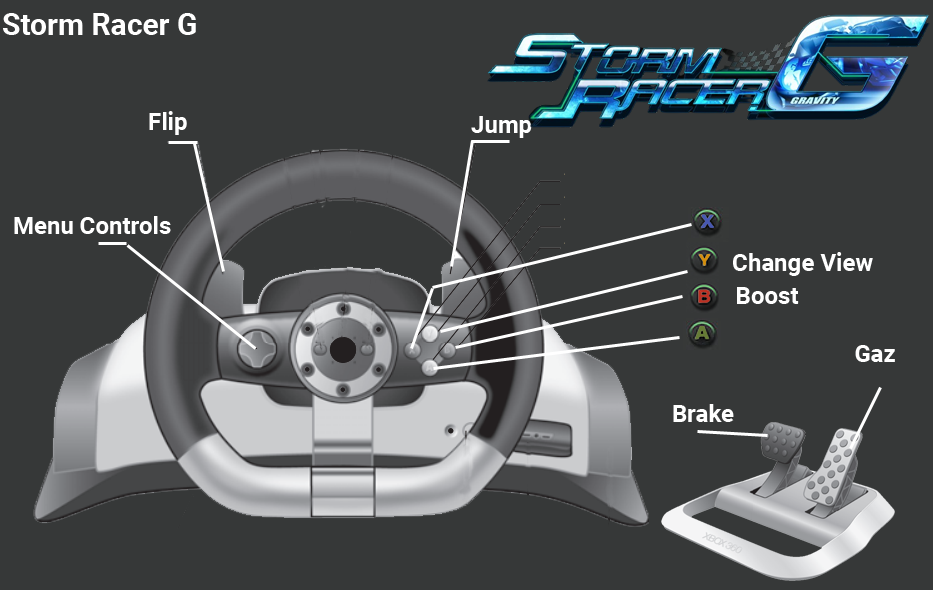
<style>
.page{position:relative;width:933px;height:590px;background:#363838}
.page>*{position:absolute;margin:0}
.t1{font:30px "Roboto-Bold";color:#ffffff}
.t2{font:24px "Roboto-Bold";color:#ffffff}
</style>
<div class="page">
<p class="t1" style="left:3px;top:13px;width:193px;height:22px">Storm Racer G</p>
<p class="t2" style="left:149px;top:111px;width:38px;height:24px">Flip</p>
<p class="t2" style="left:471px;top:116px;width:61px;height:22px">Jump</p>
<p class="t2" style="left:14px;top:216px;width:157px;height:18px">Menu Controls</p>
<p class="t2" style="left:733px;top:252px;width:140px;height:24px">Change View</p>
<p class="t2" style="left:737px;top:287px;width:62px;height:17px">Boost</p>
<p class="t2" style="left:855px;top:345px;width:40px;height:17px">Gaz</p>
<p class="t2" style="left:673px;top:404px;width:61px;height:18px">Brake</p>
</div>
